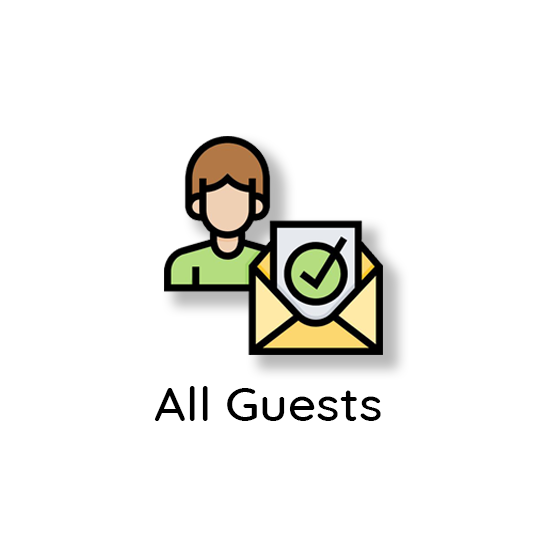
<style>
.page{position:relative;width:549px;height:549px;background:#ffffff}
.page>*{position:absolute;margin:0}
.t1{font:46.5px "Quicksand-Medium";color:#000000;scale:1.06 1}
</style>
<div class="page">
<p class="t1" style="left:154px;top:386px;width:227px;height:35px">All Guests</p>
</div>
